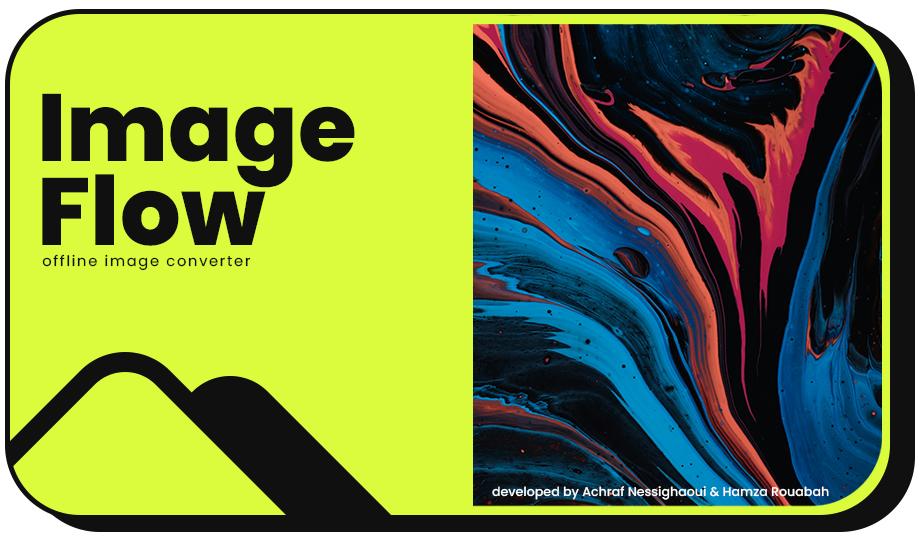
<style>
.page{position:relative;width:920px;height:540px;background:#dbfc3d}
.page>*{position:absolute;margin:0}
.t1{font:95.5px/83.2px "Poppins-ExtraBold";color:#101010}
.t2{font:14.6px "Poppins-Regular";letter-spacing:0.12em;color:#101010}
.t3{font:12.6px "Poppins-Medium";color:#ffffff}
</style>
<div class="page">
<p class="t1" style="left:42px;top:93px;width:313px;height:153px;text-align:right">Image<br>Flow</p>
<p class="t2" style="left:42px;top:254px;width:209px;height:17px">offline image converter</p>
<p class="t3" style="left:492px;top:486px;width:337px;height:14px">developed by Achraf Nessighaoui &amp; Hamza Rouabah</p>
</div>
